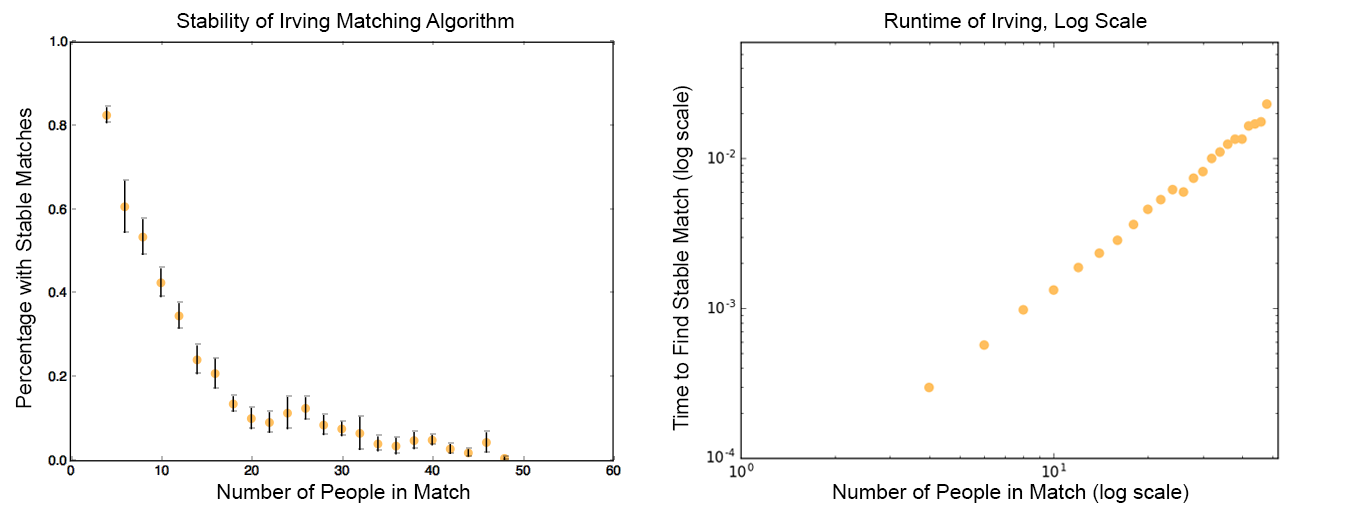
<style>
.page{position:relative;width:1346px;height:509px;background:#ffffff}
.page>*{position:absolute;margin:0}
.t1{font:21px "ArialMT";color:#000000}
.t2{font:21.4px "ArialMT";color:#000000}
</style>
<div class="page">
<p class="t1" style="left:177px;top:13px;width:337px;height:19px">Stability of Irving Matching Algorithm</p>
<p class="t1" style="left:885px;top:13px;width:262px;height:19px">Runtime of Irving, Log Scale</p>
<p class="t2" style="left:672px;top:86px;width:21px;height:345px;rotate:-90deg">Time to Find Stable Match (log scale)</p>
<p class="t2" style="left:15px;top:108px;width:21px;height:300px;rotate:-90deg">Percentage with Stable Matches</p>
<p class="t1" style="left:217px;top:484px;width:253px;height:19px">Number of People in Match</p>
<p class="t1" style="left:833px;top:484px;width:356px;height:19px">Number of People in Match (log scale)</p>
</div>
